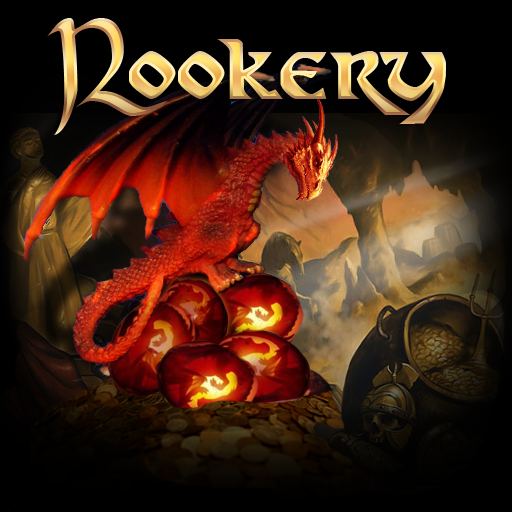
<style>
.page{position:relative;width:512px;height:512px;background:#000000}
.page>*{position:absolute;margin:0}
.t1{font:95px "Dahaut"}
.t2{font:100px "JGJUncial"}
</style>
<div class="page">
<p class="t1" style="left:47px;top:18px;width:399px;height:117px"><span class="t2">R</span>ookery</p>
</div>
